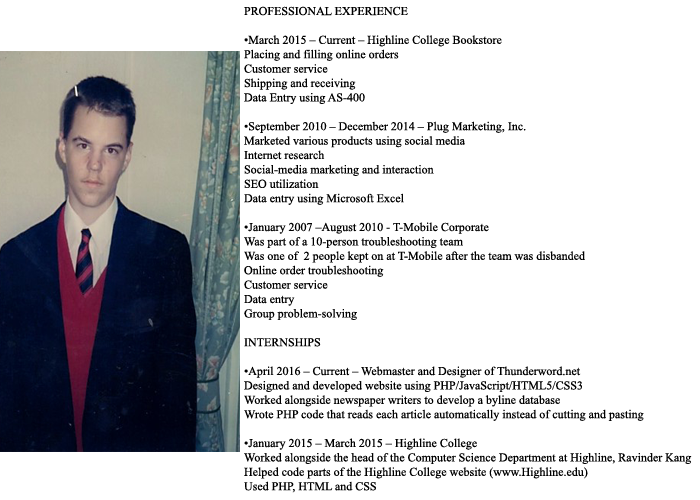
<style>
.page{position:relative;width:700px;height:500px;background:#ffffff}
.page>*{position:absolute;margin:0}
.t1{font:12px "TimesNewRomanPSMT";color:#000000}
</style>
<div class="page">
<p class="t1" style="left:244px;top:6px;width:448px;height:487px">PROFESSIONAL EXPERIENCE<br><br>•March 2015 – Current – Highline College Bookstore<br>Placing and filling online orders<br>Customer service <br>Shipping and receiving <br>Data Entry using AS-400<br><br>•September 2010 – December 2014 – Plug Marketing, Inc.<br>Marketed various products using social media <br>Internet research<br>Social-media marketing and interaction<br>SEO utilization<br>Data entry using Microsoft Excel<br><br>•January 2007 –August 2010 - T-Mobile Corporate<br>Was part of a 10-person troubleshooting team<br>Was one of  2 people kept on at T-Mobile after the team was disbanded<br>Online order troubleshooting<br>Customer service<br>Data entry<br>Group problem-solving<br><br>INTERNSHIPS<br><br>•April 2016 – Current – Webmaster and Designer of Thunderword.net<br>Designed and developed website using PHP/JavaScript/HTML5/CSS3<br>Worked alongside newspaper writers to develop a byline database<br>Wrote PHP code that reads each article automatically instead of cutting and pasting<br><br>•January 2015 – March 2015 – Highline College<br>Worked alongside the head of the Computer Science Department at Highline, Ravinder Kang<br>Helped code parts of the Highline College website (www.Highline.edu)<br>Used PHP, HTML and CSS</p>
</div>
